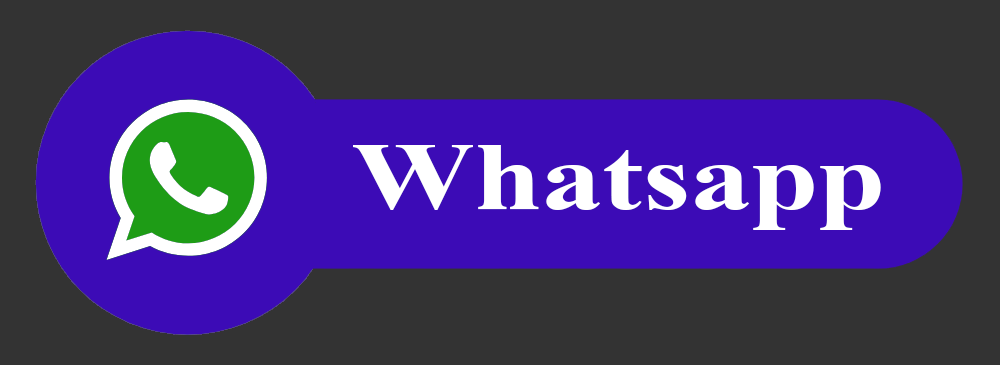
<style>
.page{position:relative;width:1000px;height:365px;background:#333333}
.page>*{position:absolute;margin:0}
.t1{font:95.8px "TimesNewRomanPS-BoldMT";color:#ffffff;scale:1.27 1}
</style>
<div class="page">
<p class="t1" style="left:353px;top:145px;width:528px;height:85px">Whatsapp</p>
</div>
